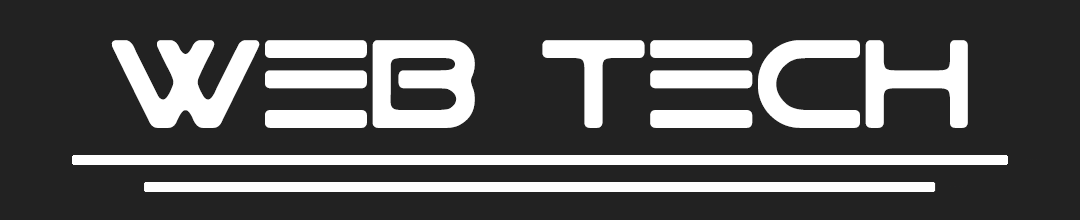
<style>
.page{position:relative;width:1080px;height:220px;background:#222222}
.page>*{position:absolute;margin:0}
.t1{font:125px "GtekTechnology";color:#ffffff}
</style>
<div class="page">
<p class="t1" style="left:111px;top:40px;width:857px;height:88px">web  tech</p>
</div>
